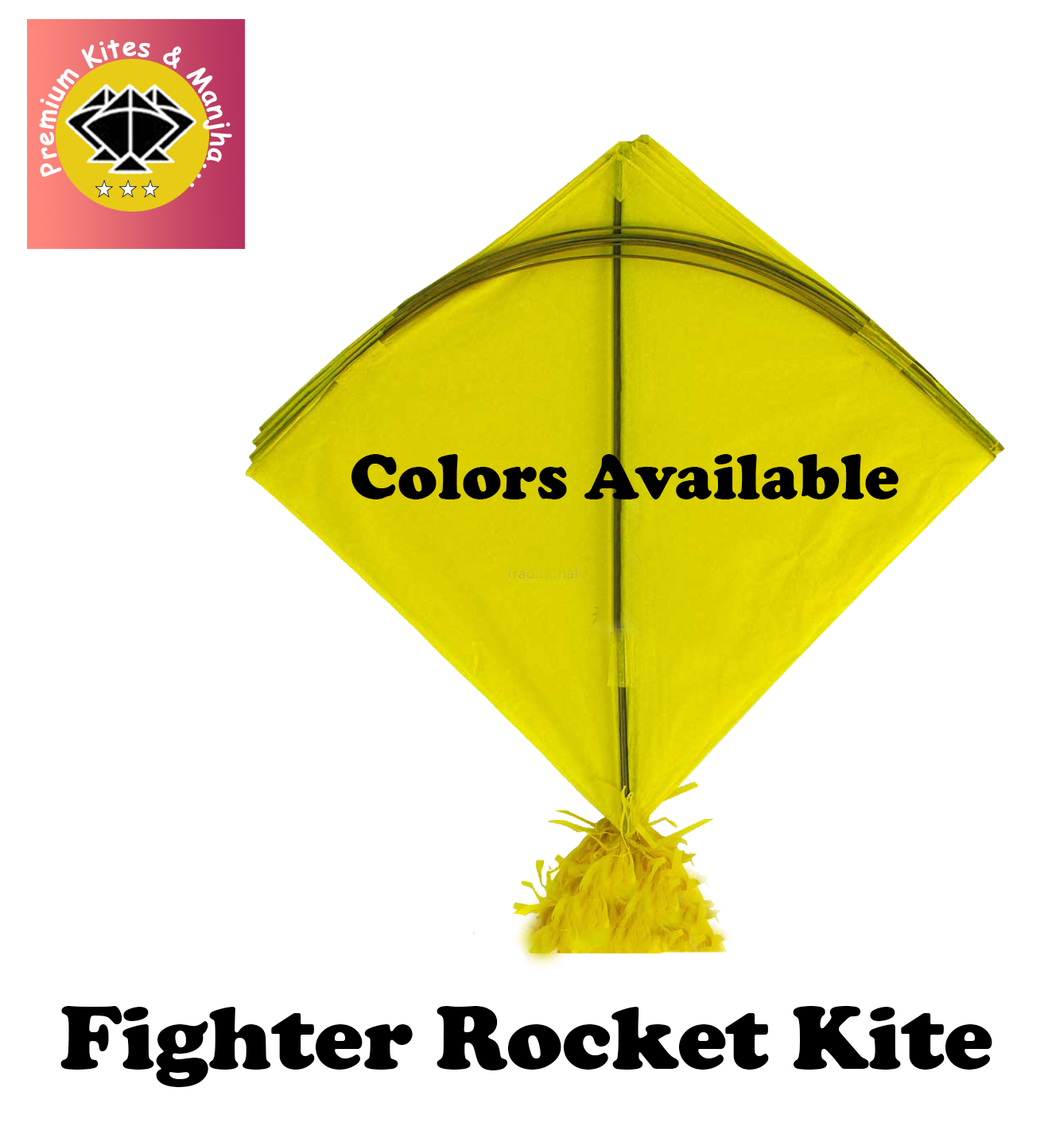
<style>
.page{position:relative;width:1048px;height:1138px;background:#ffffff}
.page>*{position:absolute;margin:0}
.t1{font:66.3px "CooperBlack";color:#000000}
.t2{font:92.8px "CooperBlack";color:#000000}
</style>
<div class="page">
<p class="t1" style="left:351px;top:454px;width:547px;height:45px">Colors Available</p>
<p class="t2" style="left:60px;top:1006px;width:932px;height:81px">Fighter Rocket Kite</p>
</div>
